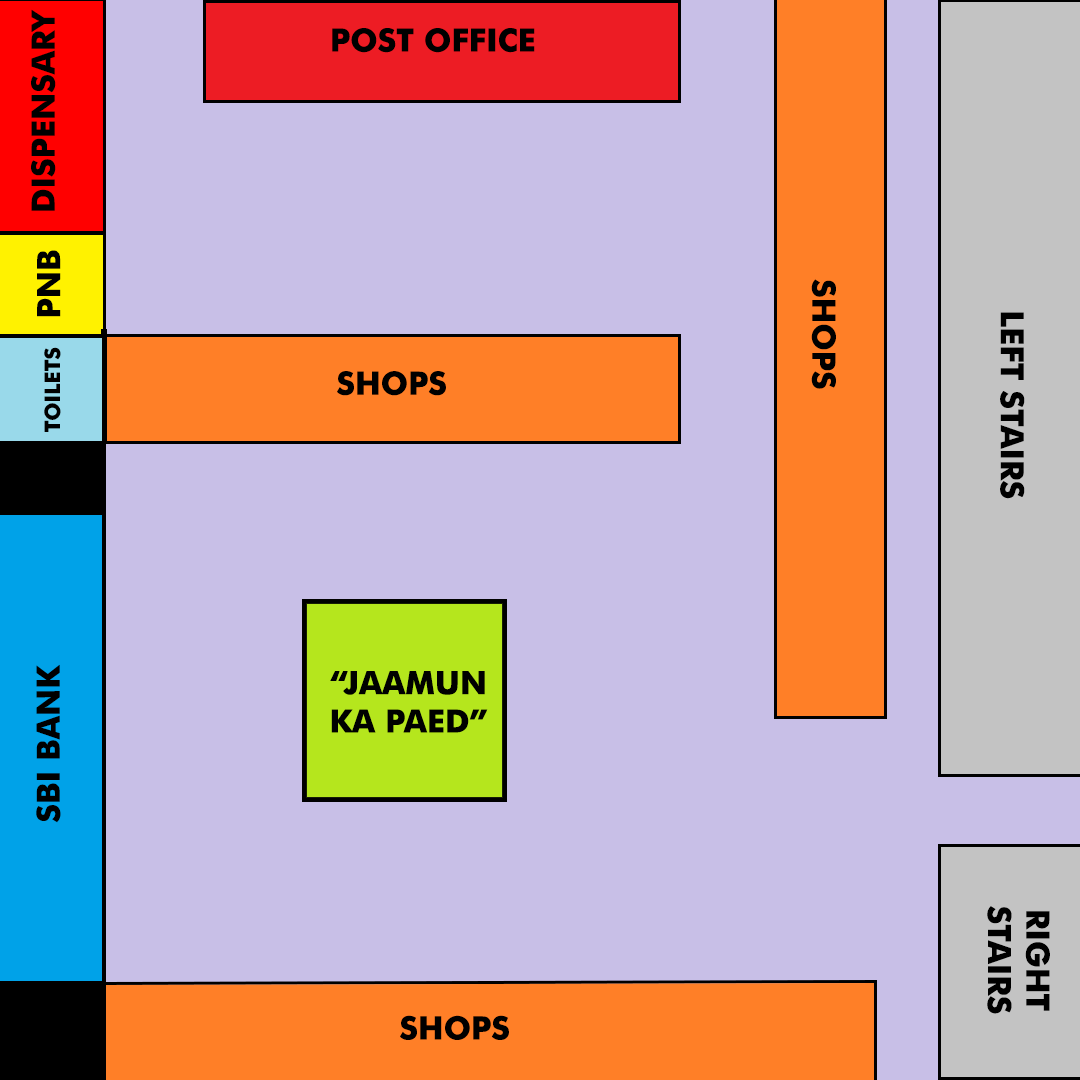
<style>
.page{position:relative;width:1080px;height:1080px;background:#c8bfe7}
.page>*{position:absolute;margin:0}
.t1{font:32px "FuturaBT-Bold";color:#000000}
.t2{font:21.3px "FuturaBT-Bold";color:#000000}
</style>
<div class="page">
<p class="t1" style="left:31px;top:9px;width:25px;height:202px;rotate:-90deg">DISPENSARY</p>
<p class="t1" style="left:332px;top:28px;width:203px;height:25px">POST OFFICE</p>
<p class="t1" style="left:37px;top:250px;width:24px;height:67px;rotate:-90deg">PNB</p>
<p class="t1" style="left:811px;top:279px;width:25px;height:110px;rotate:90deg">SHOPS</p>
<p class="t1" style="left:1000px;top:312px;width:25px;height:187px;rotate:90deg">LEFT STAIRS</p>
<p class="t2" style="left:44px;top:347px;width:17px;height:85px;rotate:-90deg">TOILETS</p>
<p class="t1" style="left:337px;top:371px;width:109px;height:25px">SHOPS</p>
<p class="t1" style="left:36px;top:664px;width:25px;height:159px;rotate:-90deg">SBI BANK</p>
<p class="t1" style="left:330px;top:671px;width:158px;height:62px;text-align:center">“JAAMUN<br>KA PAED”</p>
<p class="t1" style="left:987px;top:906px;width:63px;height:108px;text-align:center;rotate:90deg">RIGHT <br>STAIRS</p>
<p class="t1" style="left:400px;top:1015px;width:109px;height:25px">SHOPS</p>
</div>
